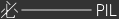
<style>
.page{position:relative;width:119px;height:19px;background:#333333}
.page>*{position:absolute;margin:0}
.t1{font:16px "NotoSansKR-Thin";letter-spacing:-0.01em;color:#ffffff}
</style>
<div class="page">
<p class="t1" style="left:97px;top:4px;width:20px;height:13px">PIL</p>
</div>
